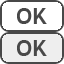
<style>
.page{position:relative;width:64px;height:64px;background:#ffffff}
.page>*{position:absolute;margin:0}
.t1{font:23px "TrebuchetMS-Bold";color:#484848}
</style>
<div class="page">
<p class="t1" style="left:17px;top:8px;width:30px;height:16px">OK</p>
<p class="t1" style="left:17px;top:40px;width:30px;height:16px">OK</p>
</div>
